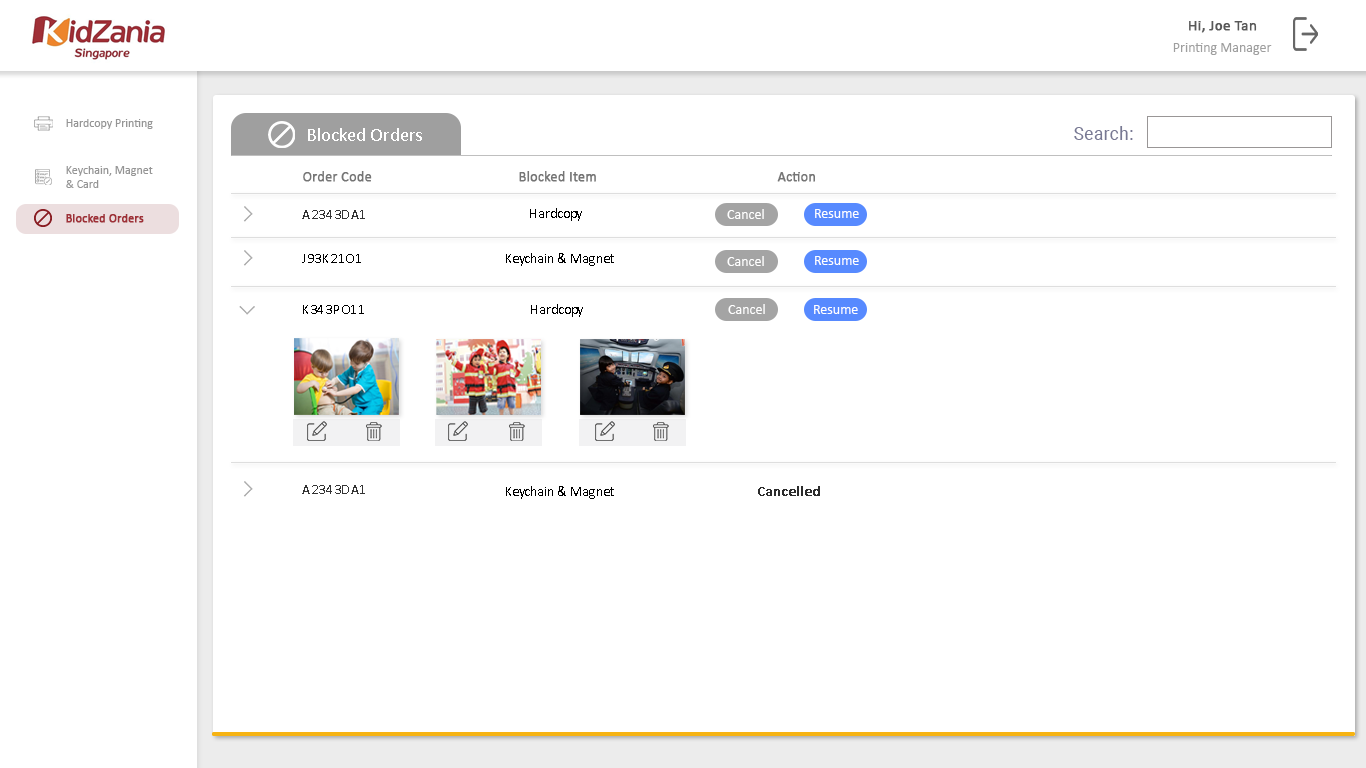
<style>
.page{position:relative;width:1366px;height:768px;background:#ffffff}
.page>*{position:absolute;margin:0}
.t1{font:15px "Calibri";color:#585858;font-weight:bold}
.t2{font:14px "Calibri";color:#9f9f9f}
.t3{font:12px "Calibri";color:#959595}
.t4{font:17.5px "Roboto-Regular";letter-spacing:0.017em;color:#787993}
.t5{font:19px "Calibri";color:#ffffff}
.t6{font:12px/14px "Calibri";color:#959595}
.t7{font:14px "Calibri";color:#757575;font-weight:bold}
.t8{font:14px "Calibri";color:#000000}
.t9{font:14px "Calibri";color:#ffffff}
.t10{font:12px "Calibri";color:#9f3037;font-weight:bold}
.t11{font:13.9px "Calibri";letter-spacing:0.05em;color:#343434}
.t12{font:14px "Calibri";letter-spacing:0.05em;color:#000000}
.t13{font:14px "Calibri";color:#2c2c2c;font-weight:bold}
</style>
<div class="page">
<p class="t1" style="left:1189px;top:21px;width:68px;height:12px">Hi, Joe Tan</p>
<p class="t2" style="left:1173px;top:43px;width:99px;height:12px">Printing Manager</p>
<p class="t3" style="left:66px;top:119px;width:87px;height:10px">Hardcopy Printing</p>
<p class="t4" style="left:1074px;top:126px;width:59px;height:14px">Search:</p>
<p class="t5" style="left:308px;top:128px;width:114px;height:13px">Blocked Orders</p>
<p class="t6" style="left:66px;top:166px;width:87px;height:22px">Keychain, Magnet <br>&amp; Card</p>
<p class="t7" style="left:303px;top:171px;width:69px;height:11px">Order Code</p>
<p class="t7" style="left:519px;top:171px;width:77px;height:11px">Blocked Item</p>
<p class="t7" style="left:777px;top:172px;width:38px;height:10px">Action</p>
<p class="t8" style="left:530px;top:208px;width:52px;height:13px">Hardcopy</p>
<p class="t9" style="left:727px;top:209px;width:37px;height:10px">Cancel</p>
<p class="t9" style="left:815px;top:209px;width:44px;height:9px">Resume</p>
<p class="t10" style="left:66px;top:214px;width:78px;height:9px">Blocked Orders</p>
<p class="t11" style="left:302px;top:210px;width:63px;height:9px">A2343DA1</p>
<p class="t12" style="left:302px;top:254px;width:59px;height:9px">J93K21O1</p>
<p class="t8" style="left:506px;top:253px;width:108px;height:13px">Keychain &amp; Magnet</p>
<p class="t9" style="left:727px;top:256px;width:37px;height:10px">Cancel</p>
<p class="t9" style="left:815px;top:256px;width:44px;height:9px">Resume</p>
<p class="t12" style="left:303px;top:305px;width:61px;height:9px">K343PO11</p>
<p class="t8" style="left:531px;top:304px;width:52px;height:13px">Hardcopy</p>
<p class="t9" style="left:728px;top:304px;width:37px;height:10px">Cancel</p>
<p class="t9" style="left:814px;top:305px;width:44px;height:9px">Resume</p>
<p class="t11" style="left:302px;top:485px;width:63px;height:9px">A2343DA1</p>
<p class="t8" style="left:506px;top:486px;width:108px;height:13px">Keychain &amp; Magnet</p>
<p class="t13" style="left:758px;top:486px;width:62px;height:10px">Cancelled</p>
</div>
